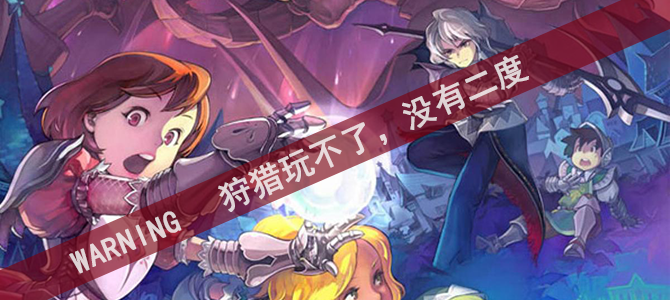
<style>
.page{position:relative;width:670px;height:300px}
.page>*{position:absolute;margin:0}
.t1{font:32.6px "SimHei";color:#e2d5d8;font-weight:bold}
.t2{font:31.1px "SimHei";color:#e7d6d8;font-weight:bold}
</style>
<div class="page">
<p class="t1" style="left:218px;top:55px;width:311px;height:157px;rotate:-24deg">狩猎玩不了，没有二度</p>
<p class="t2" style="left:69px;top:211px;width:113px;height:63px;rotate:-23deg">WARNING</p>
</div>
